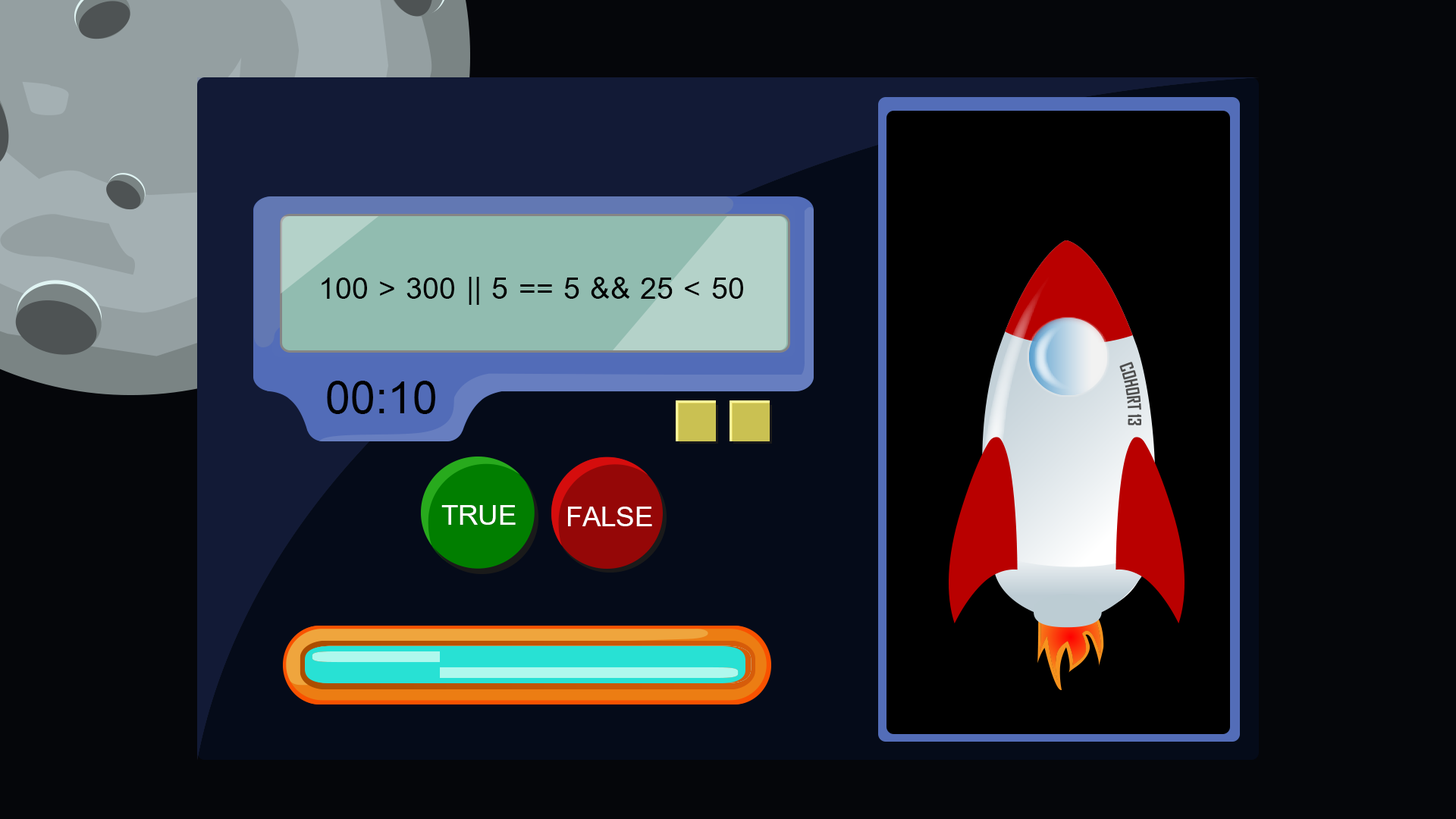
<style>
.page{position:relative;width:1456px;height:819px;background:#05060a}
.page>*{position:absolute;margin:0}
.t1{font:45.5px "CordiaUPC-Bold";color:#000000}
.t2{font:68.2px "CordiaUPC-Bold";color:#000000}
.t3{font:42px "CordiaUPC-Bold";color:#ffffff}
</style>
<div class="page">
<p class="t1" style="left:322px;top:277px;width:421px;height:28px">100 &gt; 300 || 5 == 5 &amp;&amp; 25 &lt; 50</p>
<p class="t2" style="left:327px;top:381px;width:108px;height:33px">00:10</p>
<p class="t3" style="left:441px;top:505px;width:75px;height:20px">TRUE</p>
<p class="t3" style="left:568px;top:507px;width:84px;height:19px">FALSE</p>
</div>
